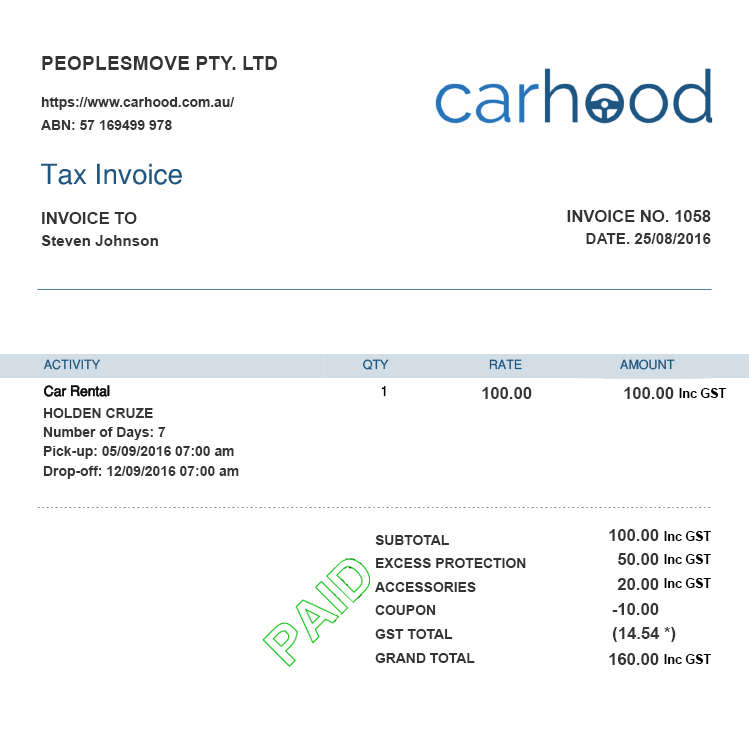
<style>
.page{position:relative;width:749px;height:750px;background:#ffffff}
.page>*{position:absolute;margin:0}
.t1{font:19.4px "Arial-BoldMT";color:#343434;text-transform:uppercase}
.t2{font:13.9px/23.6px "Arial-BoldMT";color:#343434}
.t3{font:15.3px/22.2px "Arial-BoldMT";color:#343434}
.t4{font:16.7px/22.2px "Arial-BoldMT";color:#343434;text-transform:uppercase}
.t5{font:16.7px "Arial-BoldMT";color:#343434;text-transform:uppercase}
.t6{font:12.5px "Arial-BoldMT";color:#000000}
.t7{font:13.9px/19.4px "Arial-BoldMT";color:#343434}
.t8{font:16.7px/25px "Arial-BoldMT";color:#343434}
.t9{font:13.9px/23.6px "Arial-BoldMT";color:#343434;text-transform:uppercase}
.t10{font:16.7px "Arial-BoldMT";color:#343434}
</style>
<div class="page">
<p class="t1" style="left:42px;top:56px;width:235px;height:14px">PEOPLESMOVE PTY. LTD</p>
<p class="t2" style="left:41px;top:97px;width:194px;height:33px">https://www.carhood.com.au/<br>ABN: 57 169499 978</p>
<p class="t3" style="left:41px;top:212px;width:117px;height:34px"><span class="t4">Invoice to <br></span>Steven Johnson</p>
<p class="t4" style="left:567px;top:210px;width:144px;height:34px;text-align:right">Invoice No. 1058<br><span class="t3">DATE. 25/08/2016</span></p>
<p class="t5" style="left:482px;top:387px;width:50px;height:12px">100.00</p>
<p class="t5" style="left:624px;top:387px;width:50px;height:12px">100.00</p>
<p class="t6" style="left:679px;top:388px;width:47px;height:10px">Inc GST</p>
<p class="t7" style="left:43px;top:408px;width:196px;height:71px">HOLDEN CRUZE<br>Number of Days: 7<br>Pick-up: 05/09/2016 07:00 am<br>Drop-off: 12/09/2016 07:00 am</p>
<p class="t8" style="left:609px;top:529px;width:50px;height:136px;text-align:right">100.00<br>50.00<br>20.00<br>-10.00<br><br>160.00</p>
<p class="t6" style="left:664px;top:531px;width:47px;height:10px">Inc GST</p>
<p class="t9" style="left:375px;top:535px;width:151px;height:128px">SUBTOTAL<br>Excess Protection<br>Accessories <br>Coupon <br>GST TOtal<br>GRand Total</p>
<p class="t6" style="left:664px;top:554px;width:47px;height:10px">Inc GST</p>
<p class="t6" style="left:664px;top:578px;width:47px;height:10px">Inc GST</p>
<p class="t10" style="left:612px;top:627px;width:64px;height:15px">(14.54 *)</p>
<p class="t6" style="left:664px;top:654px;width:47px;height:10px">Inc GST</p>
</div>
